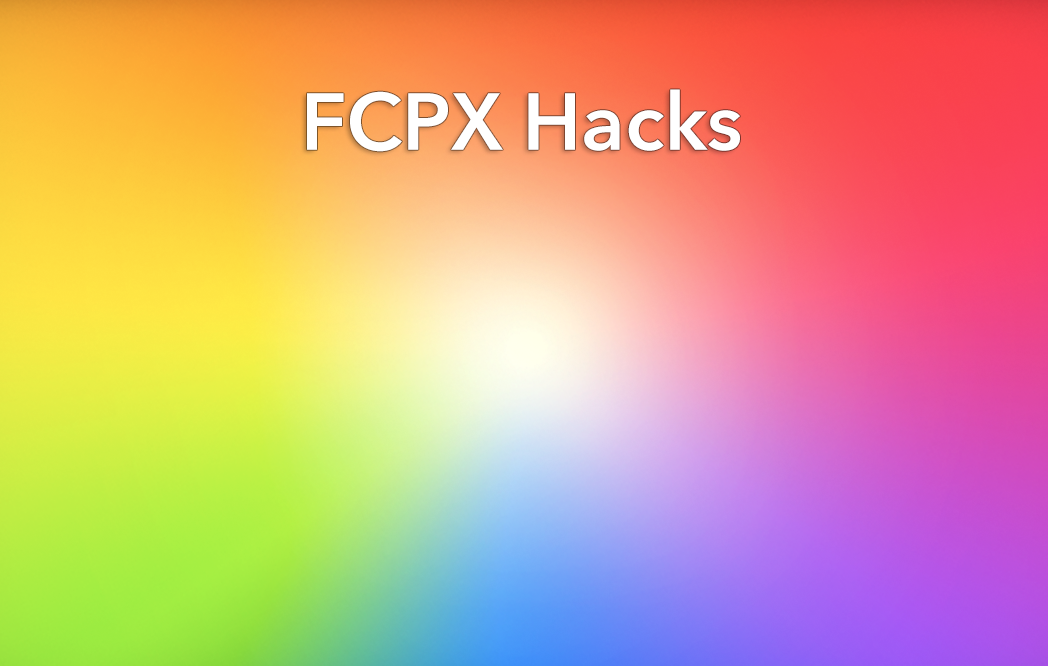
<style>
.page{position:relative;width:1048px;height:666px}
.page>*{position:absolute;margin:0}
.t1{font:79.8px "AvenirNext-DemiBold";color:#ffffff}
</style>
<div class="page">
<p class="t1" style="left:307px;top:89px;width:433px;height:63px">FCPX Hacks</p>
</div>
